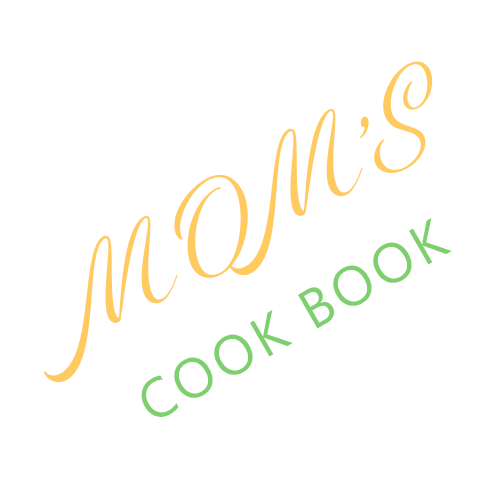
<style>
.page{position:relative;width:500px;height:500px;background:#ffffff}
.page>*{position:absolute;margin:0}
.t1{font:115.6px "Renata-Regular";letter-spacing:0.075em;color:#ffca60}
.t2{font:55.4px "SegoeUISymbol";letter-spacing:0.075em;color:#7ecf6e}
</style>
<div class="page">
<p class="t1" style="left:43px;top:61px;width:390px;height:322px;rotate:-30deg">MOM’S</p>
<p class="t2" style="left:141px;top:218px;width:311px;height:199px;rotate:-30deg">COOK BOOK</p>
</div>
